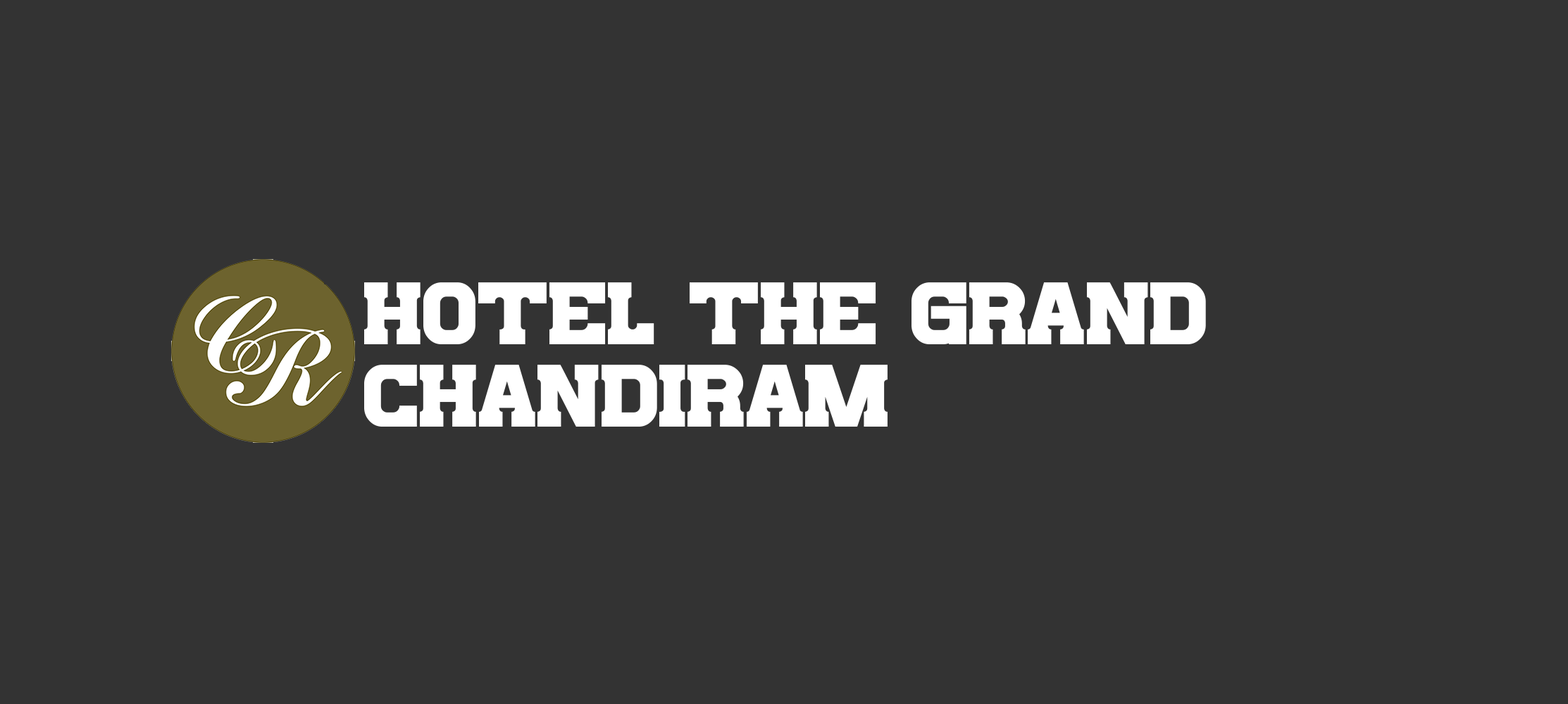
<style>
.page{position:relative;width:1568px;height:704px;background:#333333}
.page>*{position:absolute;margin:0}
.t1{font:91.7px/82.7px "BillsMafia";color:#ffffff}
</style>
<div class="page">
<p class="t1" style="left:364px;top:282px;width:842px;height:145px">Hotel The Grand<br>Chandiram</p>
</div>
